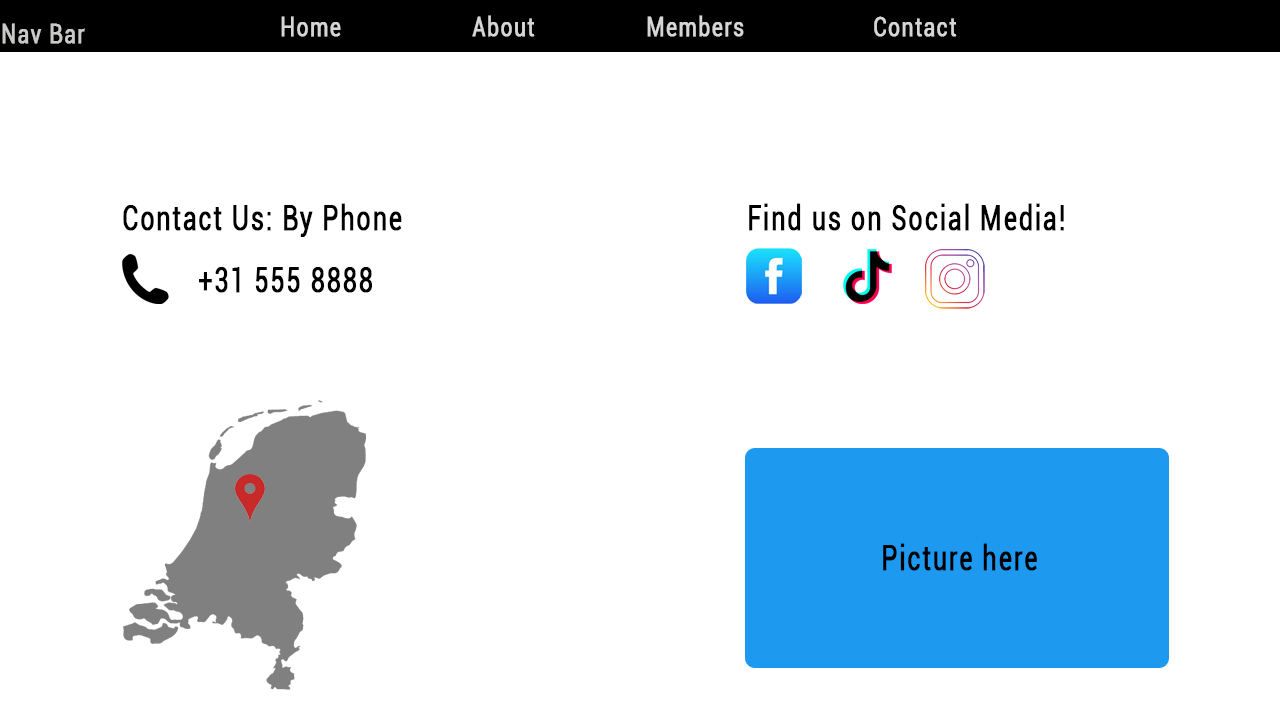
<style>
.page{position:relative;width:1280px;height:720px;background:#ffffff}
.page>*{position:absolute;margin:0}
.t1{font:27.1px "Roboto-Regular";letter-spacing:0.05em;color:#d6d6d6;font-weight:bold;scale:0.77 1}
.t2{font:27.1px "Roboto-Regular";letter-spacing:0.05em;color:#c9c9c7;font-weight:bold;scale:0.77 1}
.t3{font:32.5px "Roboto-Regular";letter-spacing:0.05em;color:#000000;font-weight:bold;scale:0.77 1}
</style>
<div class="page">
<p class="t1" style="left:281px;top:16px;width:60px;height:21px">Home</p>
<p class="t1" style="left:472px;top:15px;width:63px;height:22px">About</p>
<p class="t1" style="left:647px;top:15px;width:97px;height:22px">Members</p>
<p class="t1" style="left:874px;top:16px;width:83px;height:21px">Contact</p>
<p class="t2" style="left:2px;top:23px;width:83px;height:21px">Nav Bar</p>
<p class="t3" style="left:123px;top:203px;width:279px;height:34px">Contact Us: By Phone</p>
<p class="t3" style="left:749px;top:203px;width:315px;height:28px">Find us on Social Media!</p>
<p class="t3" style="left:199px;top:267px;width:173px;height:26px">+31 555 8888</p>
<p class="t3" style="left:883px;top:543px;width:154px;height:28px">Picture here</p>
</div>
